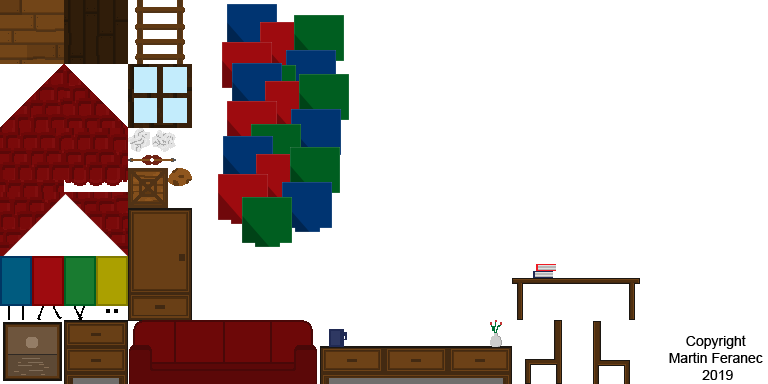
<style>
.page{position:relative;width:768px;height:384px;background:#ffffff}
.page>*{position:absolute;margin:0}
.t1{font:14px "ArialMT";color:#000000}
</style>
<div class="page">
<p class="t1" style="left:669px;top:335px;width:94px;height:45px;text-align:center">Copyright <br>Martin Feranec <br>2019</p>
</div>
